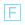
<style>
.page{position:relative;width:25px;height:25px;background:#ffffff}
.page>*{position:absolute;margin:0}
.t1{font:15.6px "ProximaNova-Regular";color:#96d1f0}
</style>
<div class="page">
<p class="t1" style="left:9px;top:7px;width:7px;height:11px">F</p>
</div>
